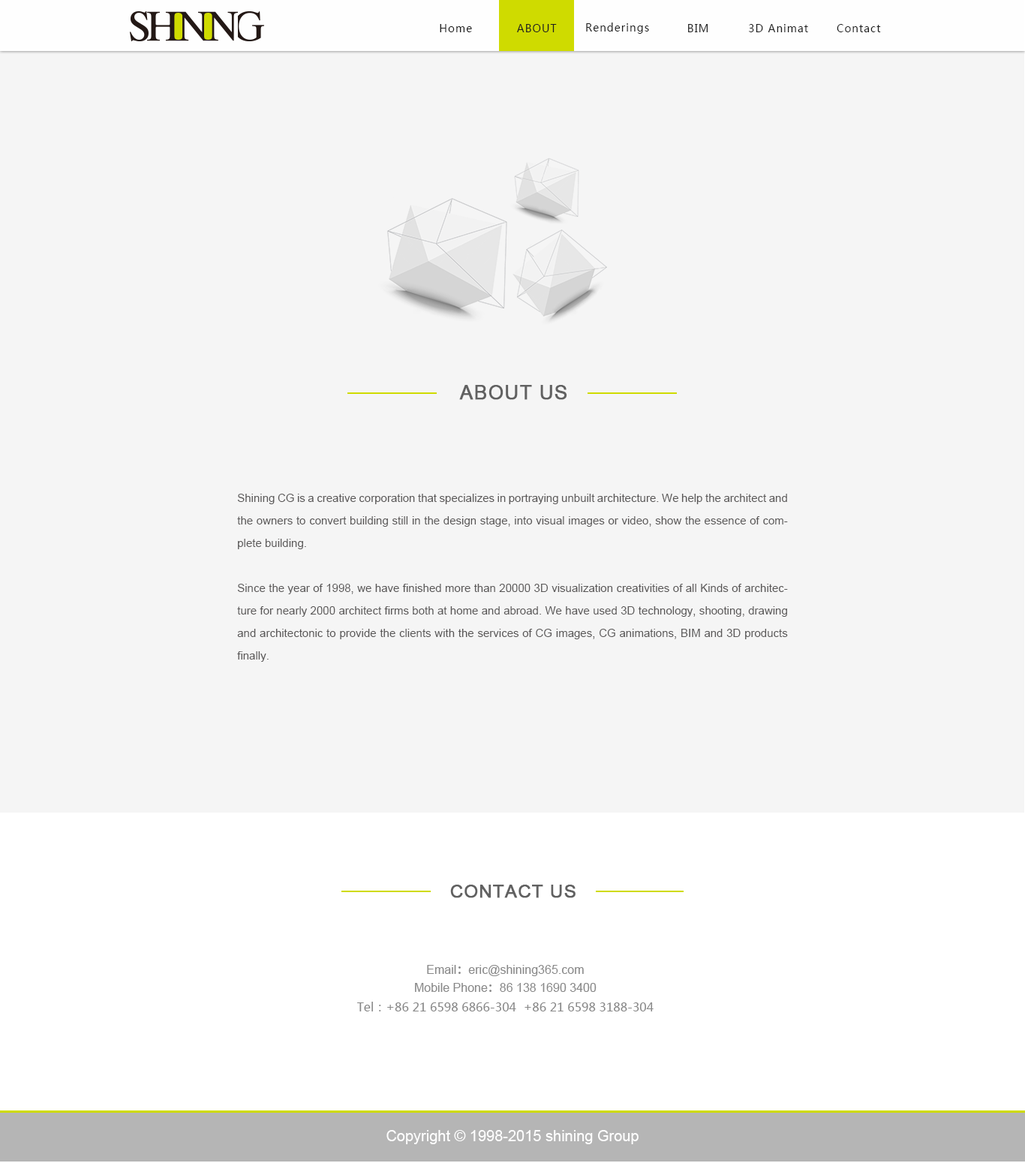
<style>
.page{position:relative;width:1025px;height:1163px;background:#f5f5f5}
.page>*{position:absolute;margin:0}
.t1{font:10.5px "MicrosoftYaHei";letter-spacing:0.075em;color:#1e1e1e}
.t2{font:19.5px "ArialMT";letter-spacing:0.025em;color:#616161;text-transform:uppercase;font-weight:bold}
.t3{font:11.3px/22.5px "ArialMT";color:#595757}
.t4{font:18px "ArialMT";letter-spacing:0.025em;color:#616161;font-weight:bold}
.t5{font:15px "ArialMT";color:#fefefe}
</style>
<div class="page">
<p class="t1" style="left:440px;top:24px;width:32px;height:8px">Home</p>
<p class="t1" style="left:517px;top:24px;width:40px;height:8px">ABOUT</p>
<p class="t1" style="left:586px;top:23px;width:63px;height:11px">Renderings</p>
<p class="t1" style="left:688px;top:24px;width:20px;height:8px">BIM</p>
<p class="t1" style="left:749px;top:24px;width:59px;height:8px">3D Animat</p>
<p class="t1" style="left:837px;top:24px;width:44px;height:8px">Contact</p>
<p class="t2" style="left:459px;top:385px;width:108px;height:15px">About Us</p>
<p class="t3" style="left:237px;top:494px;width:551px;height:168px;text-align:justify">Shining CG is a creative corporation that specializes in portraying unbuilt architecture. We help the architect and the owners to convert building still in the design stage, into visual images or video, show the essence of complete building.<br> <br>Since the year of 1998, we have finished more than 20000 3D visualization creativities of all Kinds of architecture for nearly 2000 architect firms both at home and abroad. We have used 3D technology, shooting, drawing and architectonic to provide the clients with the services of CG images, CG animations, BIM and 3D products finally.</p>
<p class="t4" style="left:450px;top:885px;width:126px;height:13px">CONTACT US</p>
<p class="t5" style="left:386px;top:1130px;width:253px;height:14px">Copyright © 1998-2015 shining Group</p>
</div>
